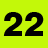
<style>
.page{position:relative;width:48px;height:48px;background:#c3f809}
.page>*{position:absolute;margin:0}
.t1{font:35.1px "Swiss721BT-Heavy";color:#010000}
</style>
<div class="page">
<p class="t1" style="left:3px;top:12px;width:41px;height:24px">22</p>
</div>
